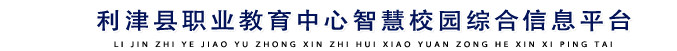
<style>
.page{position:relative;width:677px;height:51px;background:#ffffff}
.page>*{position:absolute;margin:0}
.t1{font:22.9px "AdobeHeitiStd-Regular";letter-spacing:0.114em;color:#021359;scale:1.11 1}
.t2{font:8.1px "MyriadPro-Regular";letter-spacing:0.314em;color:#000000;scale:1.11 1}
</style>
<div class="page">
<p class="t1" style="left:97px;top:9px;width:534px;height:23px">利津县职业教育中心智慧校园综合信息平台</p>
<p class="t2" style="left:114px;top:41px;width:498px;height:7px">LI JIN ZHI YE JIAO YU ZHONG XIN ZHI HUI XIAO YUAN ZONG HE XIN XI PING TAI</p>
</div>
